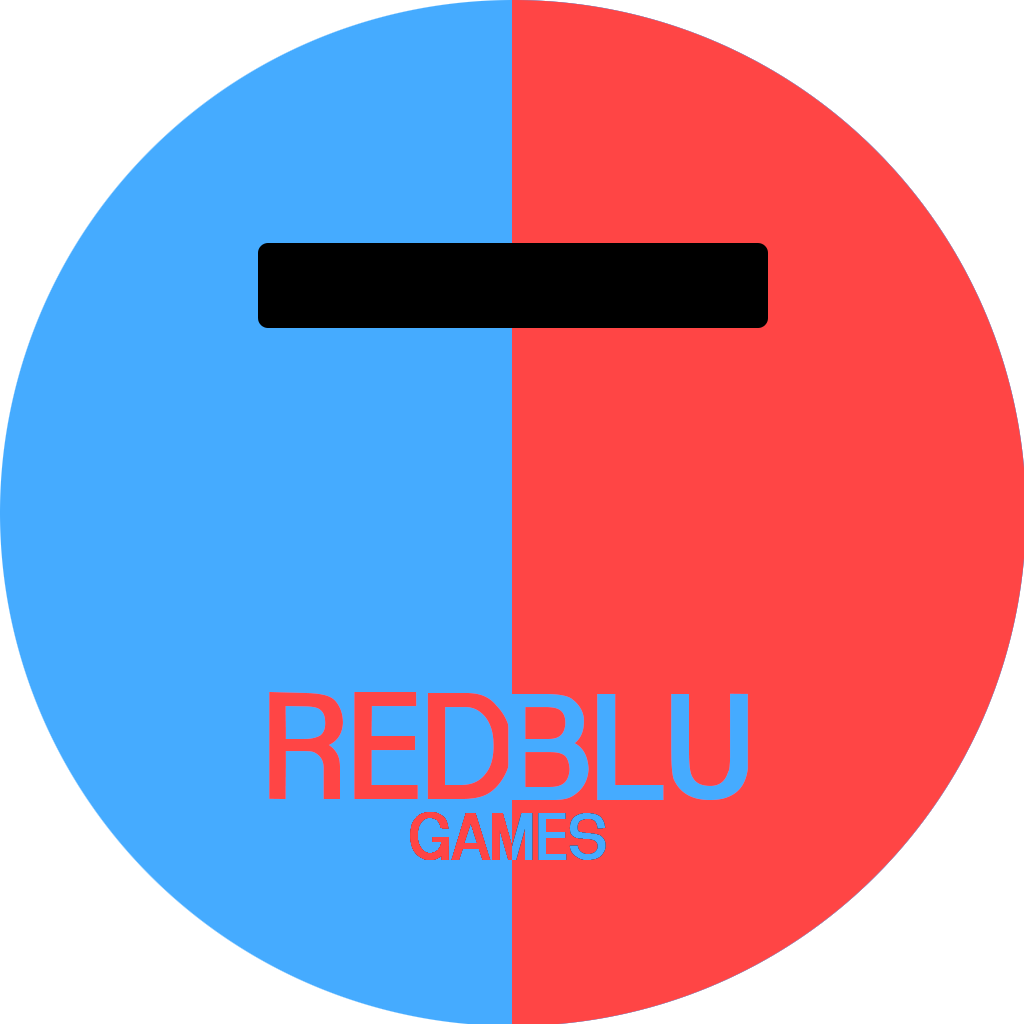
<style>
.page{position:relative;width:1024px;height:1024px;background:#ff4545}
.page>*{position:absolute;margin:0}
.t1{font:165.4px "Arctik3.5";color:#ff4545}
.t2{font:163.6px "Arctik3.5";color:#45abff;scale:1.04 1}
</style>
<div class="page">
<p class="t1" style="left:269px;top:692px;width:243px;height:107px">RED</p>
<p class="t2" style="left:508px;top:693px;width:240px;height:107px">BLU</p>
</div>
